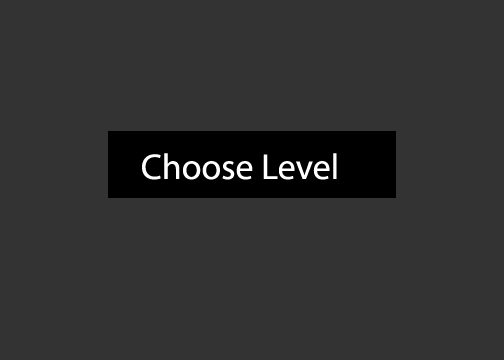
<style>
.page{position:relative;width:504px;height:360px;background:#333333}
.page>*{position:absolute;margin:0}
.t1{font:36px "MyriadPro-Regular";color:#ffffff}
</style>
<div class="page">
<p class="t1" style="left:142px;top:153px;width:195px;height:27px">Choose Level</p>
</div>
